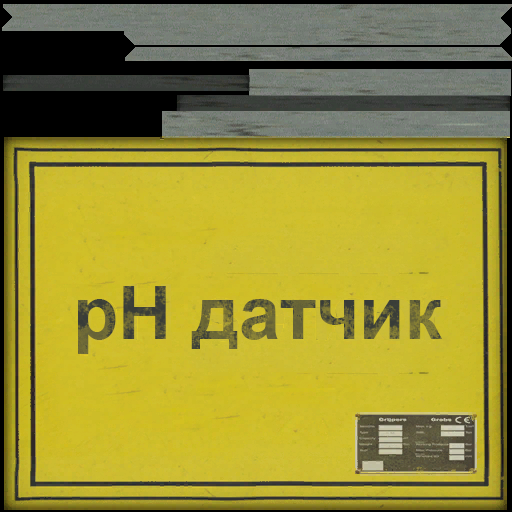
<style>
.page{position:relative;width:512px;height:512px}
.page>*{position:absolute;margin:0}
.t1{font:74px "Arial-BoldMT"}
</style>
<div class="page">
<p class="t1" style="left:78px;top:286px;width:364px;height:68px">pH датчик</p>
</div>
